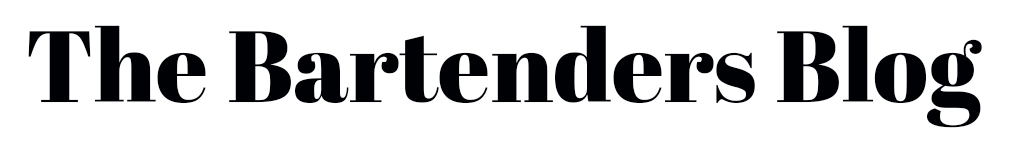
<style>
.page{position:relative;width:1015px;height:148px;background:#ffffff}
.page>*{position:absolute;margin:0}
.t1{font:101px "AbrilFatface-Regular";color:#000104}
</style>
<div class="page">
<p class="t1" style="left:28px;top:25px;width:954px;height:103px">The Bartenders Blog</p>
</div>
